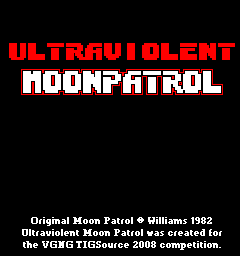
<style>
.page{position:relative;width:240px;height:256px;background:#000000}
.page>*{position:absolute;margin:0}
.t1{font:10px "MS Serif";color:#ffffff;font-weight:bold}
</style>
<div class="page">
<p class="t1" style="left:22px;top:217px;width:200px;height:33px;text-align:center">Original Moon Patrol © Williams 1982<br>Ultraviolent Moon Patrol was created for<br>the VGNG TIGSource 2008 competition.</p>
</div>
